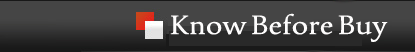
<style>
.page{position:relative;width:415px;height:52px;background:#454545}
.page>*{position:absolute;margin:0}
.t1{font:30px "UrduTypesetting";color:#fefdfd}
</style>
<div class="page">
<p class="t1" style="left:170px;top:13px;width:218px;height:29px">Know Before Buy</p>
</div>
